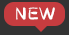
<style>
.page{position:relative;width:69px;height:35px;background:#c63c3f}
.page>*{position:absolute;margin:0}
.t1{font:18px "JSArirangHON-Regular";letter-spacing:0.05em;color:#ffffff}
</style>
<div class="page">
<p class="t1" style="left:16px;top:7px;width:39px;height:13px">NEW</p>
</div>
